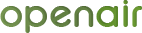
<style>
.page{position:relative;width:142px;height:33px;background:#ffffff}
.page>*{position:absolute;margin:0}
.t1{font:48px "cjust-Medium";color:#668a3c}
.t2{font:48px "cjust-Medium";color:#6aa028}
</style>
<div class="page">
<p class="t1" style="left:0px;top:0px;width:142px;height:33px">open<span class="t2">air</span></p>
</div>
